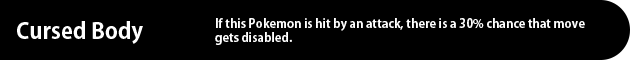
<style>
.page{position:relative;width:630px;height:60px;background:#000000}
.page>*{position:absolute;margin:0}
.t1{font:22px "AdobeGothicStd-Bold";color:#ffffff}
.t2{font:12px "AdobeGothicStd-Bold";color:#ffffff}
</style>
<div class="page">
<p class="t1" style="left:17px;top:21px;width:126px;height:23px">Cursed Body</p>
<p class="t2" style="left:215px;top:18px;width:370px;height:27px">If this Pokemon is hit by an attack, there is a 30% chance that move<br>gets disabled.</p>
</div>
